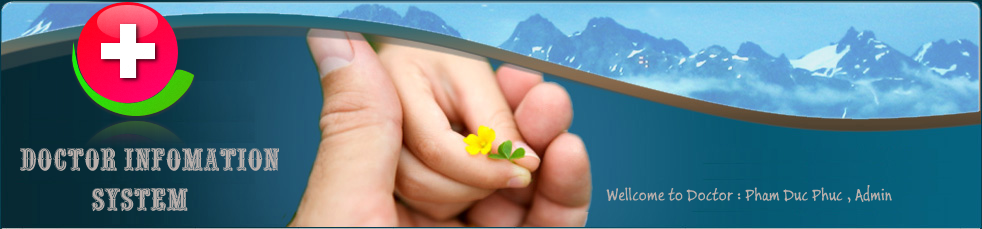
<style>
.page{position:relative;width:982px;height:229px}
.page>*{position:absolute;margin:0}
.t1{font:30px/20px "VNI-Silver";color:#b9afab}
.t2{font:18px "BuxtonSketch";color:#b9afab}
</style>
<div class="page">
<p class="t1" style="left:20px;top:147px;width:259px;height:65px">Doctor Infomation    <br>  System</p>
<p class="t2" style="left:606px;top:185px;width:286px;height:18px">Wellcome to Doctor : Pham Duc Phuc , Admin</p>
</div>
